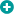
<style>
.page{position:relative;width:14px;height:14px;background:#009999}
.page>*{position:absolute;margin:0}
.t1{font:14px "Arial-Black";color:#ffffff}
</style>
<div class="page">
<p class="t1" style="left:3px;top:3px;width:8px;height:8px">+</p>
</div>
